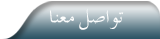
<style>
.page{position:relative;width:160px;height:39px}
.page>*{position:absolute;margin:0}
.t1{font:26px "TraditionalArabic";letter-spacing:-0.08em;color:#fbfcfc}
</style>
<div class="page">
<p class="t1" style="left:50px;top:8px;width:74px;height:22px">تو ا صل   معنا</p>
</div>
